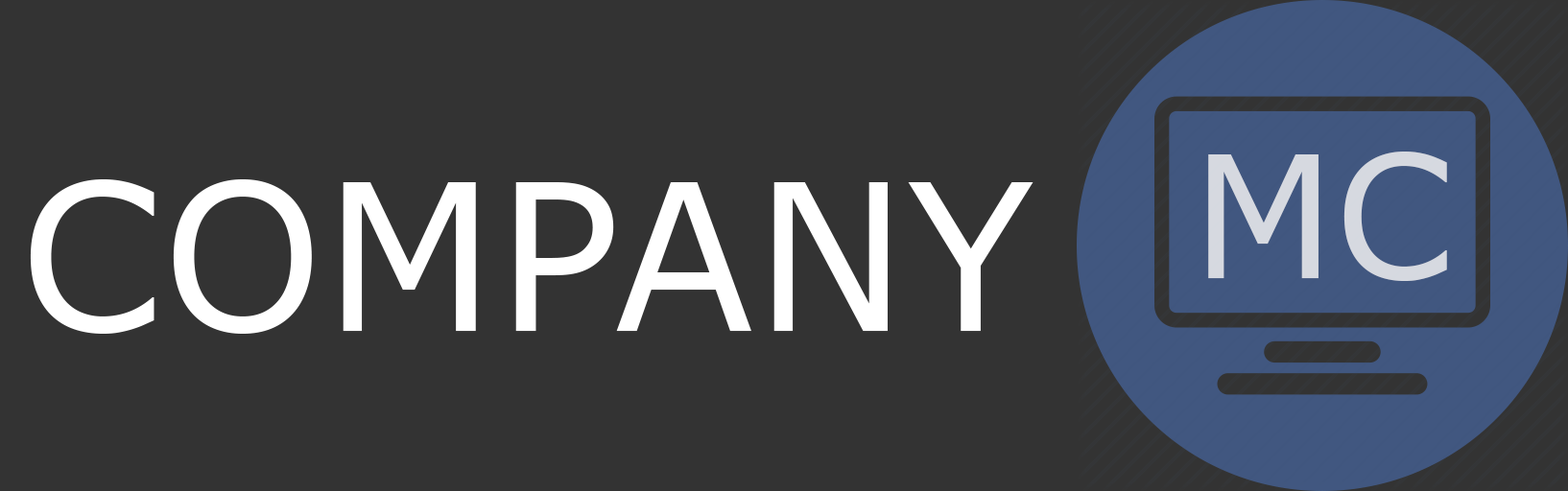
<style>
.page{position:relative;width:1568px;height:491px;background:#333333}
.page>*{position:absolute;margin:0}
.t1{font:169.4px "Verdana";color:#d6d9e0}
.t2{font:204.8px "Verdana";color:#ffffff}
</style>
<div class="page">
<p class="t1" style="left:1208px;top:152px;width:239px;height:129px">MC</p>
<p class="t2" style="left:30px;top:179px;width:1003px;height:155px">COMPANY</p>
</div>
